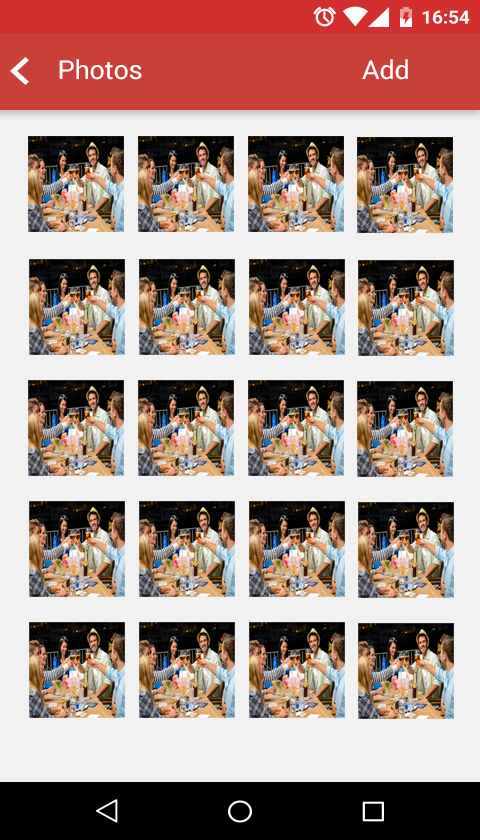
<style>
.page{position:relative;width:480px;height:840px;background:#f1f1f1}
.page>*{position:absolute;margin:0}
.t1{font:26.1px "Roboto-Regular";letter-spacing:-0.01em;color:#ffffff;scale:1.03 1}
.t2{font:26.1px "TimesNewRomanPSMT";letter-spacing:-0.01em;color:#ffffff;scale:1.03 1}
</style>
<div class="page">
<p class="t1" style="left:59px;top:59px;width:349px;height:21px">Photos                                  Add <span class="t2">Photos</span></p>
</div>
